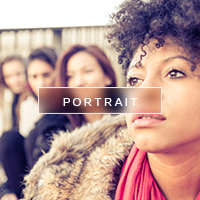
<style>
.page{position:relative;width:200px;height:200px}
.page>*{position:absolute;margin:0}
.t1{font:11.9px "IstokWeb-Regular";letter-spacing:0.2em;color:#ffffff;text-transform:uppercase}
</style>
<div class="page">
<p class="t1" style="left:63px;top:98px;width:75px;height:8px">PORTRAIT</p>
</div>
